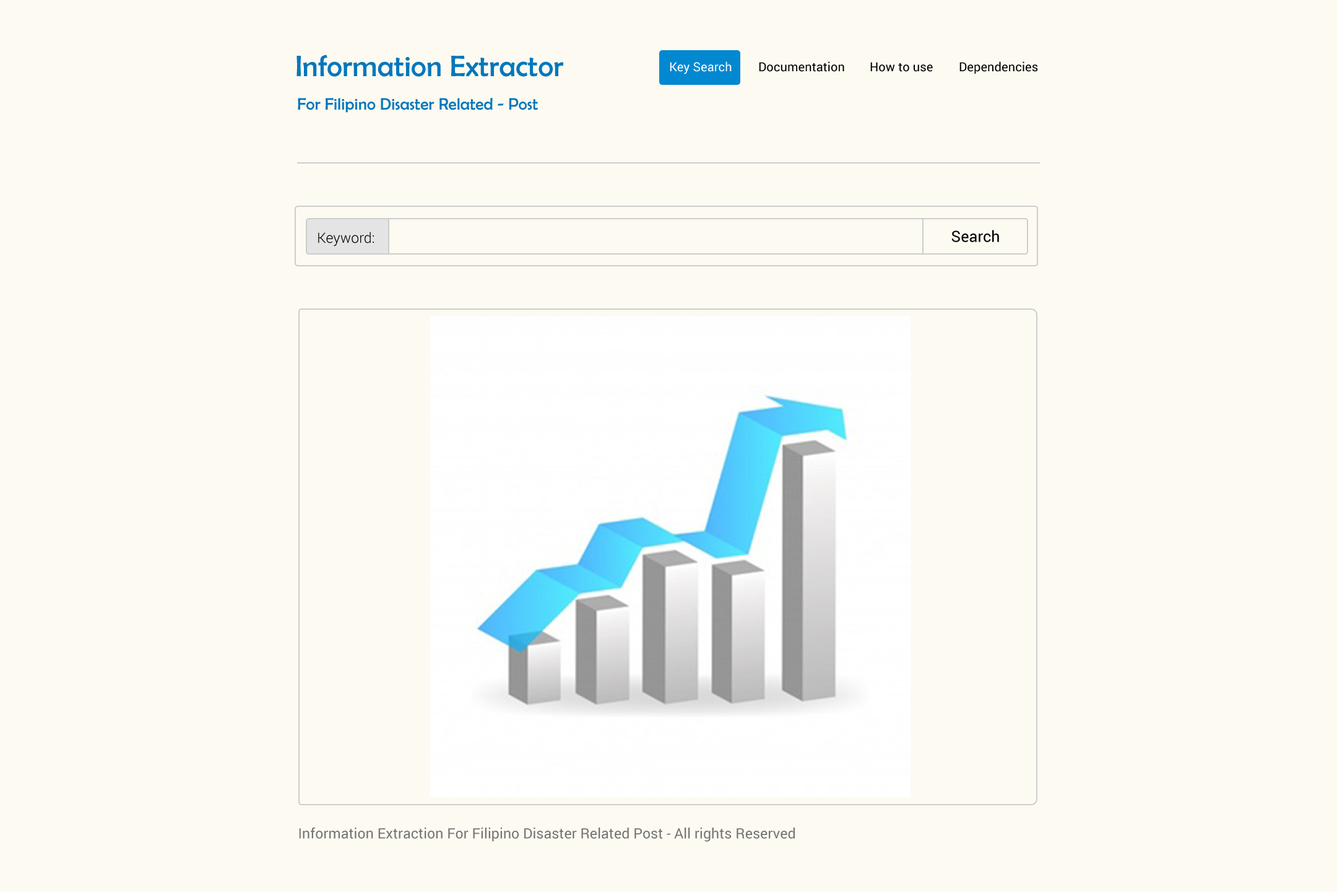
<style>
.page{position:relative;width:1337px;height:892px;background:#fdfaf1}
.page>*{position:absolute;margin:0}
.t1{font:29.7px "BerlinSansFB-Reg";letter-spacing:0.005em;color:#0277bd}
.t2{font:12.4px "Roboto-Regular";letter-spacing:0.005em;color:#000000}
.t3{font:12.4px "Roboto-Regular";letter-spacing:0.005em;color:#ffffff}
.t4{font:16.7px "BerlinSansFB-Reg";letter-spacing:0.005em;color:#0277bd}
.t5{font:14.2px "Roboto-Light";letter-spacing:0.005em;color:#000000}
.t6{font:15.5px "Roboto-Regular";letter-spacing:0.005em;color:#000000}
.t7{font:14.2px "Roboto-Regular";letter-spacing:0.005em;color:#757575}
</style>
<div class="page">
<p class="t1" style="left:297px;top:54px;width:266px;height:23px">Information Extractor</p>
<p class="t2" style="left:670px;top:61px;width:368px;height:13px"><span class="t3">Key Search </span> Documentation  How to use  Dependencies</p>
<p class="t4" style="left:298px;top:98px;width:240px;height:15px">For Filipino Disaster Related - Post</p>
<p class="t5" style="left:318px;top:232px;width:56px;height:14px">Keyword:</p>
<p class="t6" style="left:952px;top:230px;width:47px;height:12px">Search</p>
<p class="t7" style="left:299px;top:827px;width:496px;height:14px">Information Extraction For Filipino Disaster Related Post - All rights Reserved</p>
</div>
